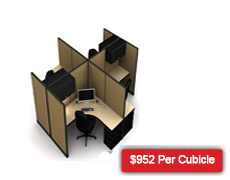
<style>
.page{position:relative;width:230px;height:180px;background:#ffffff}
.page>*{position:absolute;margin:0}
.t1{font:11px "ArialMT";letter-spacing:-0.025em;color:#ffffff;font-weight:bold}
</style>
<div class="page">
<p class="t1" style="left:130px;top:155px;width:85px;height:10px">$952 Per Cubicle</p>
</div>
